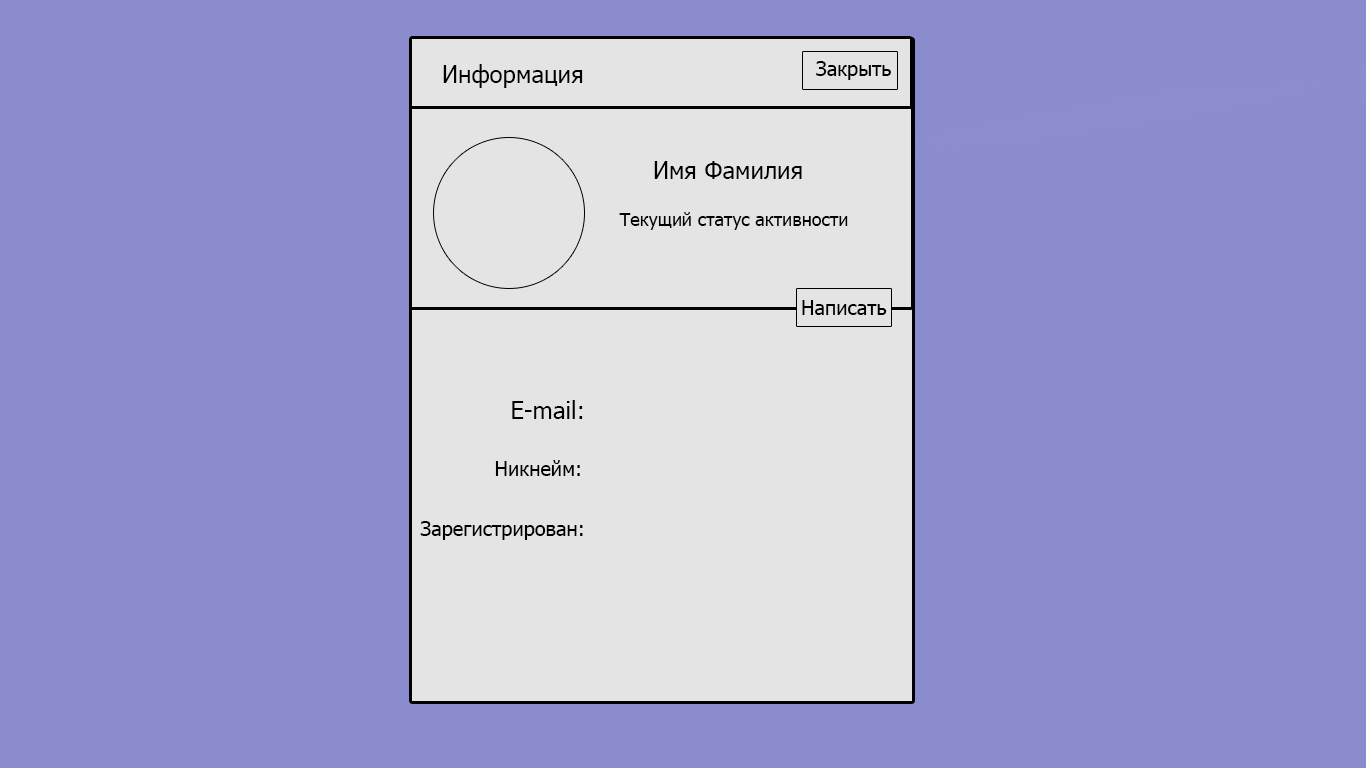
<style>
.page{position:relative;width:1366px;height:768px;background:#8a8cce}
.page>*{position:absolute;margin:0}
.t1{font:24px "Tahoma";color:#000000}
.t2{font:20px "Tahoma";color:#000000}
.t3{font:18px "Tahoma";color:#000000}
</style>
<div class="page">
<p class="t1" style="left:443px;top:64px;width:140px;height:24px">Информация</p>
<p class="t2" style="left:816px;top:61px;width:75px;height:19px">Закрыть</p>
<p class="t1" style="left:654px;top:161px;width:148px;height:18px">Имя Фамилия</p>
<p class="t3" style="left:619px;top:212px;width:229px;height:18px">Текущий статус активности</p>
<p class="t2" style="left:802px;top:300px;width:85px;height:15px">Написать</p>
<p class="t1" style="left:512px;top:400px;width:71px;height:19px">E-mail:</p>
<p class="t2" style="left:495px;top:460px;width:85px;height:16px">Никнейм:</p>
<p class="t2" style="left:420px;top:521px;width:163px;height:19px">Зарегистрирован:</p>
</div>
